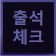
<style>
.page{position:relative;width:56px;height:56px;background:#0c0819}
.page>*{position:absolute;margin:0}
.t1{font:16px "MalgunGothicBold";color:#6861a3}
</style>
<div class="page">
<p class="t1" style="left:13px;top:10px;width:31px;height:35px">출석<br>체크</p>
</div>
